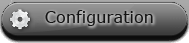
<style>
.page{position:relative;width:189px;height:43px}
.page>*{position:absolute;margin:0}
.t1{font:16px "Verdana";letter-spacing:0.005em;color:#141414}
</style>
<div class="page">
<p class="t1" style="left:45px;top:10px;width:108px;height:16px">Configuration</p>
</div>
